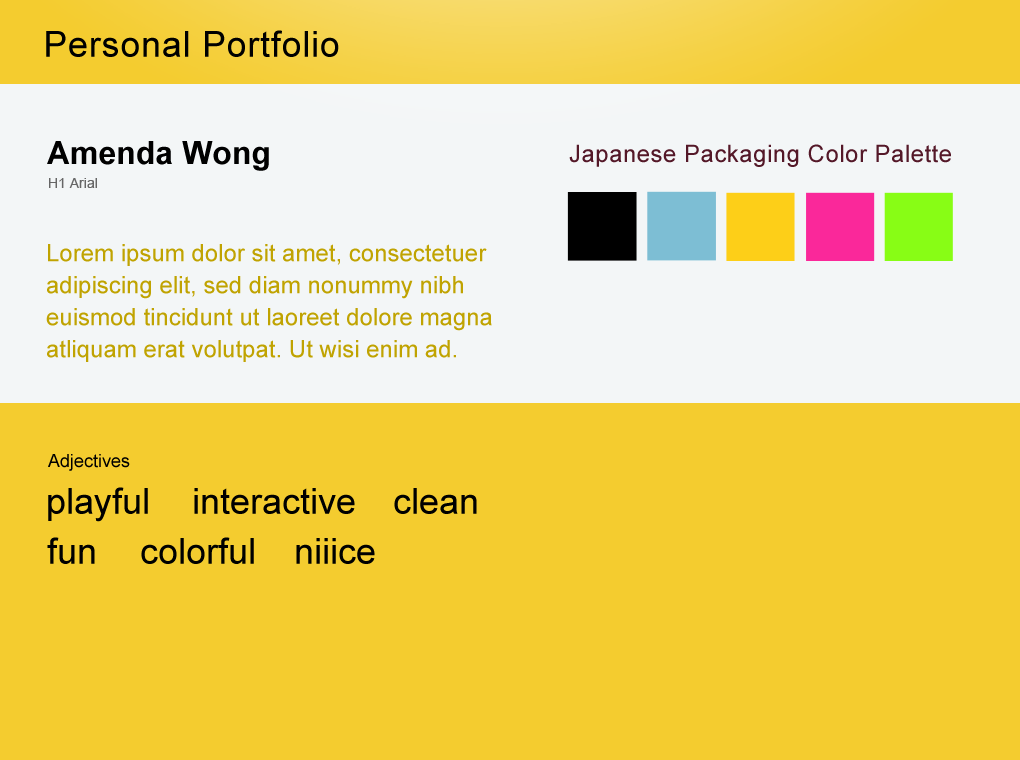
<style>
.page{position:relative;width:1020px;height:760px;background:#f4cc2f}
.page>*{position:absolute;margin:0}
.t1{font:36px "ArialMT";letter-spacing:0.02em;color:#000000}
.t2{font:32px "Arial-BoldMT";color:#000000}
.t3{font:24px "ArialMT";letter-spacing:0.02em;color:#541828}
.t4{font:14px "ArialMT";color:#666666}
.t5{font:24px/32px "ArialMT";color:#c0a301}
.t6{font:18px "ArialMT";color:#000000}
.t7{font:36px "ArialMT";color:#000000}
</style>
<div class="page">
<p class="t1" style="left:46px;top:30px;width:293px;height:27px">Personal Portfolio</p>
<p class="t2" style="left:47px;top:141px;width:222px;height:30px">Amenda Wong</p>
<p class="t3" style="left:569px;top:144px;width:382px;height:23px">Japanese Packaging Color Palette</p>
<p class="t4" style="left:49px;top:178px;width:48px;height:10px">H1 Arial</p>
<p class="t5" style="left:46px;top:244px;width:446px;height:118px">Lorem ipsum dolor sit amet, consectetuer adipiscing elit, sed diam nonummy nibh euismod tincidunt ut laoreet dolore magna atliquam erat volutpat. Ut wisi enim ad.</p>
<p class="t6" style="left:48px;top:454px;width:82px;height:17px">Adjectives</p>
<p class="t7" style="left:48px;top:487px;width:100px;height:35px">playful</p>
<p class="t7" style="left:194px;top:488px;width:161px;height:26px">interactive</p>
<p class="t7" style="left:394px;top:488px;width:83px;height:26px">clean</p>
<p class="t7" style="left:47px;top:537px;width:48px;height:27px">fun</p>
<p class="t7" style="left:141px;top:537px;width:113px;height:27px">colorful</p>
<p class="t7" style="left:296px;top:538px;width:79px;height:26px">niiice</p>
</div>
